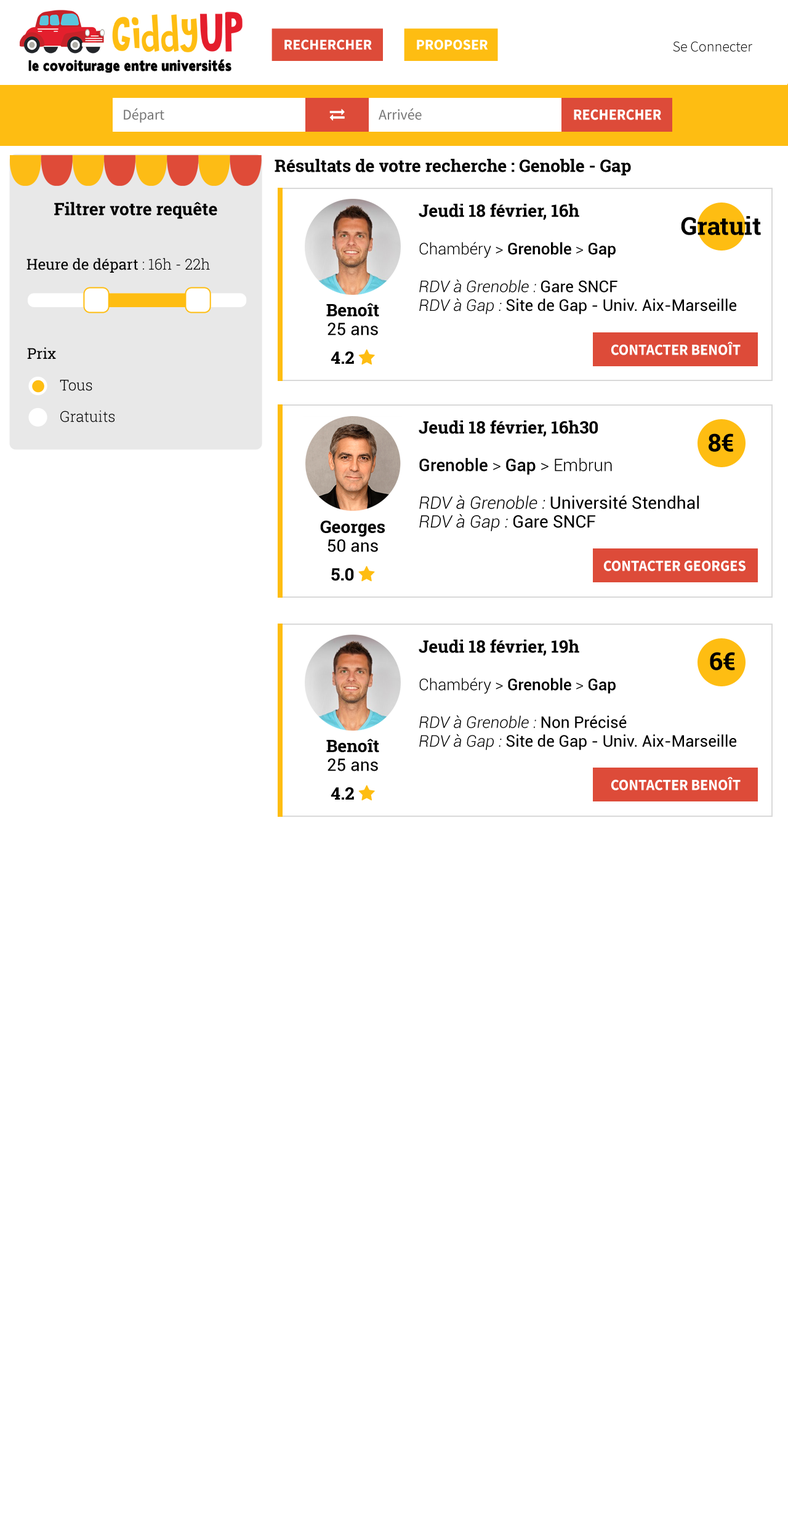
<style>
.page{position:relative;width:788px;height:1513px;background:#ffffff}
.page>*{position:absolute;margin:0}
.t1{font:14.8px "SourceSansPro-Bold";color:#ffffff;text-transform:uppercase}
.t2{font:14.8px "SourceSansPro-Light";color:#000000}
.t3{font:14.8px "SourceSansPro-Regular";color:#767676}
.t4{font:15.5px "SourceSansPro-Bold";color:#ffffff;text-transform:uppercase;scale:0.95 1}
.t5{font:17.2px "RobotoSlab-Bold";color:#000000}
.t6{font:16px/18.8px "Roboto-Regular";color:#000000}
.t7{font:17.2px/18.8px "RobotoSlab-Bold";color:#000000}
.t8{font:17.2px/18.8px "Roboto-Regular";color:#000000}
.t9{font:16px/18.8px "Roboto-Light";color:#000000}
.t10{font:16px/18.8px "Roboto-Medium";color:#000000}
.t11{font:16px/18.8px "Roboto-LightItalic";color:#000000}
.t12{font:24.6px "RobotoSlab-Bold";color:#000000}
.t13{font:14.8px "RobotoSlab-Regular";color:#000000}
.t14{font:14.8px "RobotoSlab-Light";color:#000000}
.t15{font:14.8px/15.7px "RobotoSlab-Light";color:#000000}
.t16{font:17.2px/18.8px "Roboto-Medium";color:#000000}
.t17{font:17.2px/18.8px "Roboto-Light";color:#000000}
.t18{font:17.2px/18.8px "Roboto-LightItalic";color:#000000}
</style>
<div class="page">
<p class="t1" style="left:284px;top:39px;width:88px;height:11px">Rechercher</p>
<p class="t1" style="left:417px;top:39px;width:71px;height:11px">proposer</p>
<p class="t2" style="left:673px;top:41px;width:79px;height:11px">Se Connecter</p>
<p class="t3" style="left:124px;top:108px;width:40px;height:15px">Départ</p>
<p class="t3" style="left:379px;top:108px;width:43px;height:12px">Arrivée</p>
<p class="t4" style="left:574px;top:109px;width:87px;height:11px">Rechercher</p>
<p class="t5" style="left:275px;top:159px;width:356px;height:16px">Résultats de votre recherche : Genoble - Gap</p>
<p class="t5" style="left:54px;top:202px;width:163px;height:17px">Filtrer votre requête</p>
<p class="t6" style="left:419px;top:203px;width:317px;height:112px"><span class="t7">Jeudi 18 février, 16h<br></span><span class="t8"><br></span><span class="t9">Chambéry &gt; </span><span class="t10">Grenoble</span><span class="t9"> &gt; </span><span class="t10">Gap<br><br></span><span class="t11">RDV à Grenoble : </span>Gare SNCF<br><span class="t11">RDV à Gap : </span>Site de Gap - Univ. Aix-Marseille</p>
<p class="t12" style="left:681px;top:216px;width:80px;height:19px">Gratuit</p>
<p class="t13" style="left:26px;top:258px;width:184px;height:15px">Heure de départ<span class="t14"> : 16h - 22h</span></p>
<p class="t7" style="left:326px;top:303px;width:53px;height:33px;text-align:center">Benoît<br><span class="t8">25 ans</span></p>
<p class="t4" style="left:611px;top:342px;width:130px;height:13px">contacter benoÎt</p>
<p class="t13" style="left:27px;top:347px;width:29px;height:12px">Prix</p>
<p class="t15" style="left:60px;top:380px;width:55px;height:42px">Tous<br><br>Gratuits</p>
<p class="t7" style="left:419px;top:420px;width:280px;height:111px">Jeudi 18 février, 16h30<br><span class="t8"><br></span><span class="t16">Grenoble</span><span class="t17"> &gt; </span><span class="t16">Gap </span><span class="t17">&gt; Embrun<br></span><span class="t16"><br></span><span class="t18">RDV à Grenoble : </span><span class="t8">Université Stendhal<br></span><span class="t18">RDV à Gap : </span><span class="t8">Gare SNCF</span></p>
<p class="t12" style="left:709px;top:433px;width:24px;height:19px">8€</p>
<p class="t7" style="left:320px;top:520px;width:65px;height:32px;text-align:center">Georges<br><span class="t8">50 ans</span></p>
<p class="t4" style="left:603px;top:560px;width:143px;height:11px">contacter Georges</p>
<p class="t6" style="left:419px;top:639px;width:317px;height:111px"><span class="t7">Jeudi 18 février, 19h<br></span><span class="t8"><br></span><span class="t9">Chambéry &gt; </span><span class="t10">Grenoble</span><span class="t9"> &gt; </span><span class="t10">Gap<br><br></span><span class="t11">RDV à Grenoble : </span>Non Précisé<br><span class="t11">RDV à Gap : </span>Site de Gap - Univ. Aix-Marseille</p>
<p class="t12" style="left:710px;top:652px;width:25px;height:18px">6€</p>
<p class="t7" style="left:326px;top:739px;width:53px;height:32px;text-align:center">Benoît<br><span class="t8">25 ans</span></p>
<p class="t4" style="left:611px;top:777px;width:130px;height:13px">contacter benoÎt</p>
</div>
